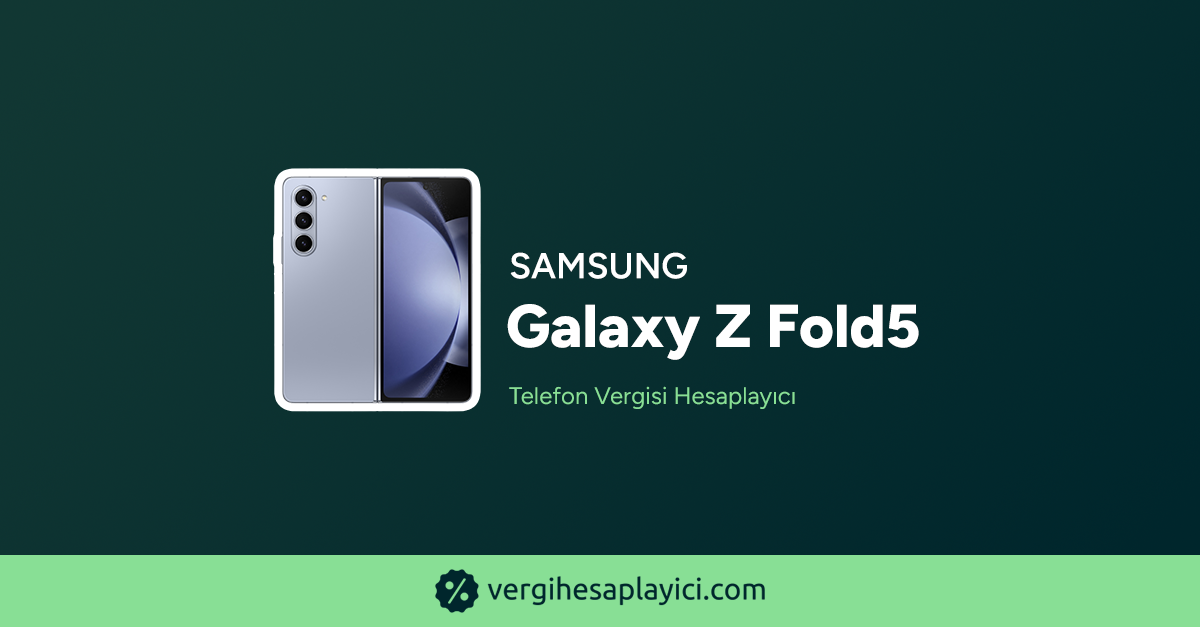
<style>
.page{position:relative;width:1200px;height:627px}
.page>*{position:absolute;margin:0}
.t1{font:36px "Figtree-SemiBold";color:#ffffff;text-transform:uppercase;font-weight:bold}
.t2{font:60.3px "Figtree-ExtraBold";color:#ffffff;font-weight:bold}
.t3{font:24px "Figtree-Regular";color:#88df95;font-weight:bold}
</style>
<div class="page">
<p class="t1" style="left:510px;top:252px;width:177px;height:27px">Samsung</p>
<p class="t2" style="left:507px;top:304px;width:412px;height:56px">Galaxy Z Fold5</p>
<p class="t3" style="left:509px;top:386px;width:286px;height:23px">Telefon Vergisi Hesaplayıcı</p>
</div>
